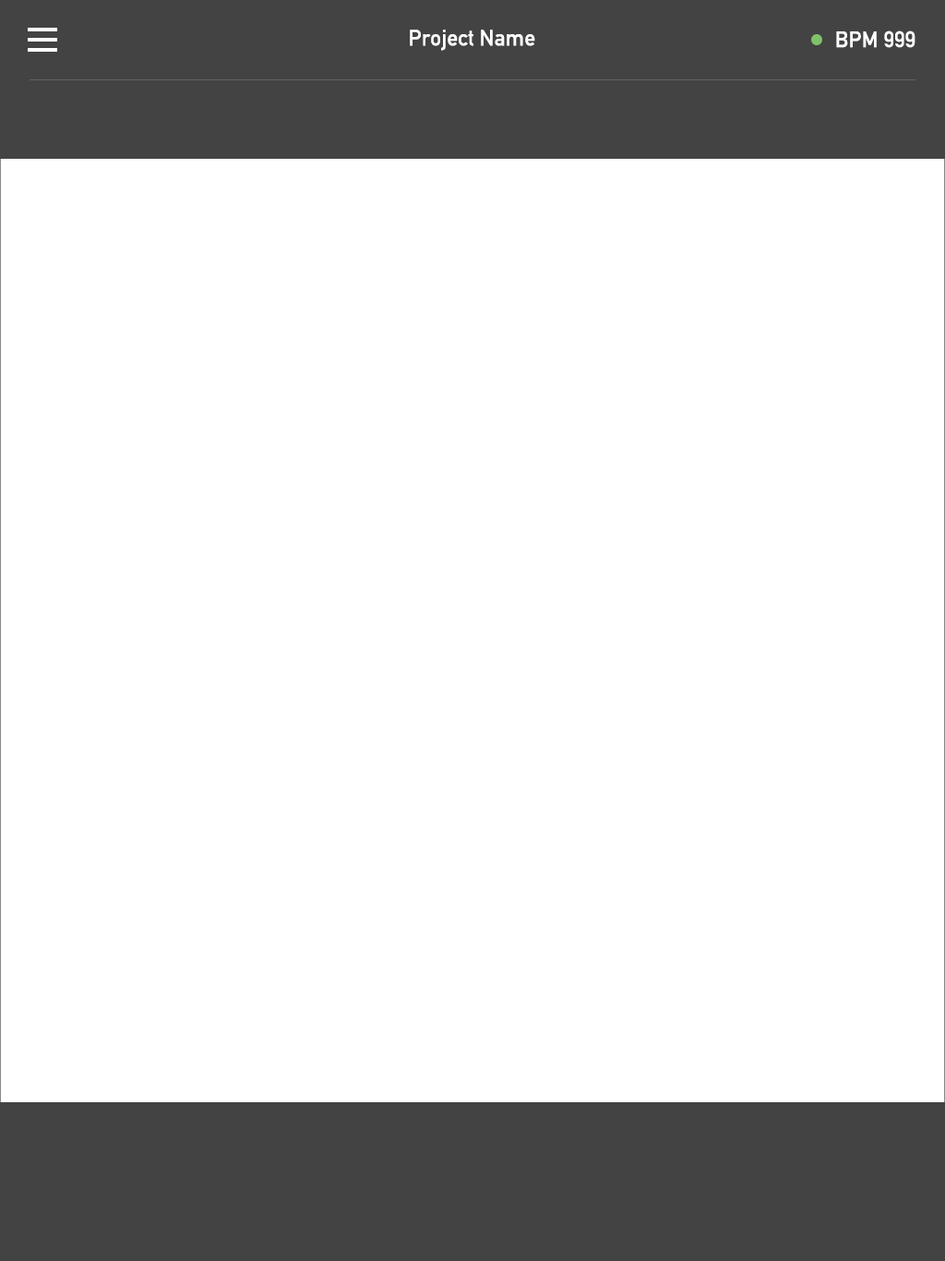
<style>
.page{position:relative;width:945px;height:1261px;background:#ffffff}
.page>*{position:absolute;margin:0}
.t1{font:22.2px "DINAlternate-Bold";color:#ffffff}
</style>
<div class="page">
<p class="t1" style="left:410px;top:30px;width:126px;height:21px">Project Name</p>
<p class="t1" style="left:837px;top:30px;width:79px;height:18px">BPM 999</p>
</div>
